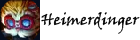
<style>
.page{position:relative;width:140px;height:40px;background:#ffffff}
.page>*{position:absolute;margin:0}
.t1{font:12px "VinerHandITC";color:#000000}
</style>
<div class="page">
<p class="t1" style="left:41px;top:12px;width:99px;height:22px">Heimerdinger</p>
</div>
